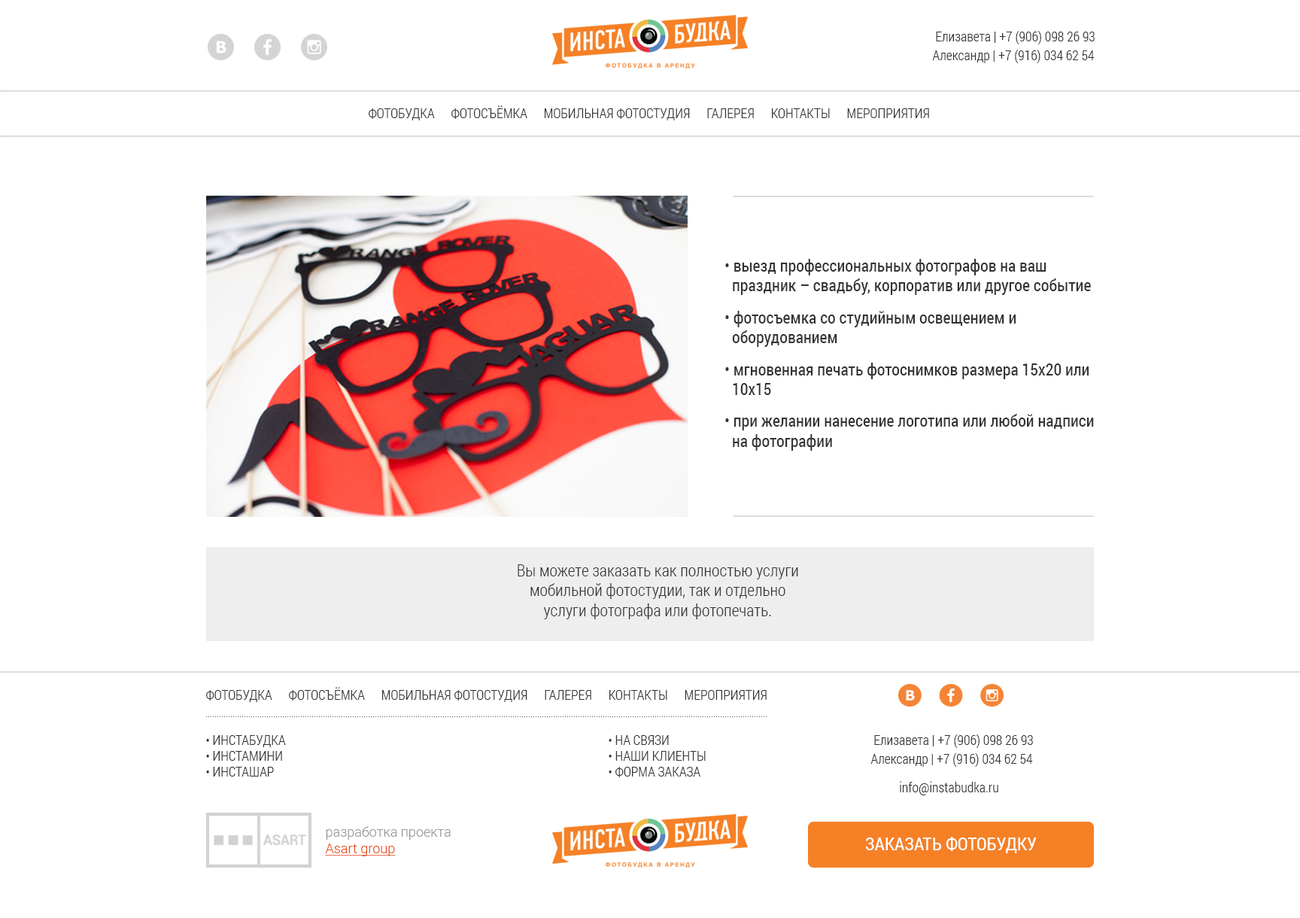
<style>
.page{position:relative;width:1300px;height:918px;background:#ffffff}
.page>*{position:absolute;margin:0}
.t1{font:13.5px/18.8px "RobotoCondensed-Light";color:#333333}
.t2{font:13.5px "RobotoCondensed-Light";color:#333333;text-transform:uppercase}
.t3{font:16.5px "RobotoCondensed-Regular";color:#333333}
.t4{font:16.5px "RobotoCondensed-Light";color:#333333}
.t5{font:13.5px/15.8px "RobotoCondensed-Light";color:#333333;text-transform:uppercase}
.t6{font:13.5px "RobotoCondensed-Light";color:#333333}
.t7{font:13.5px "Roboto-Light";color:#999999}
.t8{font:13.5px "Roboto-Light";color:#e94e1b;text-decoration:underline}
.t9{font:18px "RobotoCondensed-Regular";color:#ffffff;text-transform:uppercase}
</style>
<div class="page">
<p class="t1" style="left:932px;top:31px;width:162px;height:32px">Елизавета | +7 (906) 098 26 93<br>Александр | +7 (916) 034 62 54</p>
<p class="t2" style="left:369px;top:105px;width:560px;height:15px">фотобудка фотосъёмка мобильная фотостудия галерея контакты мероприятия</p>
<p class="t3" style="left:725px;top:259px;width:369px;height:191px">• выезд профессиональных фотографов на ваш праздник – свадьбу, корпоратив или другое событие<br> <br>• фотосъемка со студийным освещением и оборудованием<br> <br>• мгновенная печать фотоснимков размера 15х20 или 10х15<br> <br>• при желании нанесение логотипа или любой надписи на фотографии</p>
<p class="t4" style="left:517px;top:564px;width:281px;height:55px;text-align:center">Вы можете заказать как полностью услуги<br>мобильной фотостудии, так и отдельно<br>услуги фотографа или фотопечать.</p>
<p class="t2" style="left:206px;top:687px;width:560px;height:15px">фотобудка фотосъёмка мобильная фотостудия галерея контакты мероприятия</p>
<p class="t5" style="left:206px;top:735px;width:80px;height:41px">• инстабудка<br>• инстамини<br>• инсташар</p>
<p class="t5" style="left:608px;top:735px;width:97px;height:42px">• на связи<br>• наши клиенты<br>• форма заказа</p>
<p class="t1" style="left:870px;top:734px;width:163px;height:32px">Елизавета | +7 (906) 098 26 93<br>Александр | +7 (916) 034 62 54</p>
<p class="t6" style="left:899px;top:781px;width:99px;height:14px">info@instabudka.ru</p>
<p class="t7" style="left:325px;top:826px;width:125px;height:30px">разработка проекта<br><span class="t8">Asart group</span></p>
<p class="t9" style="left:865px;top:836px;width:171px;height:17px">заказать фотобудку</p>
</div>
